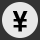
<style>
.page{position:relative;width:40px;height:40px;background:#e8e8e8}
.page>*{position:absolute;margin:0}
.t1{font:30px "Seravek";letter-spacing:0.2em;color:#000000;font-weight:bold}
</style>
<div class="page">
<p class="t1" style="left:13px;top:11px;width:15px;height:21px">¥</p>
</div>
